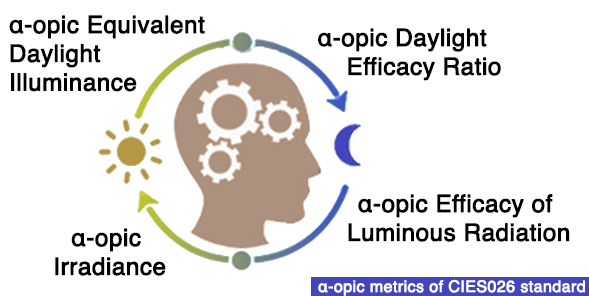
<style>
.page{position:relative;width:589px;height:296px;background:#ffffff}
.page>*{position:absolute;margin:0}
.t1{font:24px "Helvetica";color:#000000;font-weight:bold}
.t2{font:16px "Helvetica";color:#ffffff;font-weight:bold}
</style>
<div class="page">
<p class="t1" style="left:9px;top:15px;width:196px;height:77px">α-opic Equivalent <br>Daylight <br>Illuminance</p>
<p class="t1" style="left:318px;top:28px;width:183px;height:53px;text-align:center">α-opic Daylight <br>     Efficacy Ratio</p>
<p class="t1" style="left:348px;top:194px;width:222px;height:48px;text-align:center">α-opic Efficacy of <br>Luminous Radiation</p>
<p class="t1" style="left:55px;top:228px;width:111px;height:48px;text-align:center">α-opic <br>Irradiance</p>
<p class="t2" style="left:318px;top:279px;width:267px;height:17px">α-opic metrics of CIES026 standard</p>
</div>
